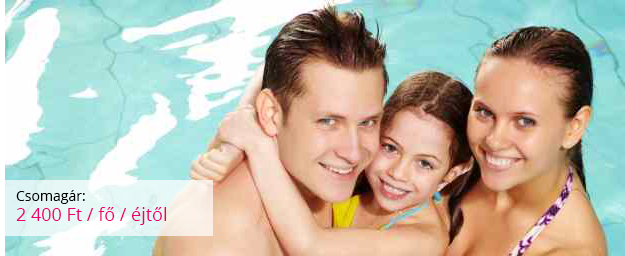
<style>
.page{position:relative;width:625px;height:256px}
.page>*{position:absolute;margin:0}
.t1{font:18px/20px "OpenSans";color:#ec006e}
.t2{font:14px/20px "OpenSans";color:#000000}
</style>
<div class="page">
<p class="t1" style="left:16px;top:190px;width:151px;height:35px"><span class="t2">Csomagár: <br></span>2 400 Ft / fő / éjtől</p>
</div>
